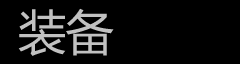
<style>
.page{position:relative;width:240px;height:64px;background:#000000}
.page>*{position:absolute;margin:0}
.t1{font:48px "MicrosoftYaHei";color:#c1c1c1}
</style>
<div class="page">
<p class="t1" style="left:18px;top:8px;width:96px;height:48px">装备</p>
</div>
